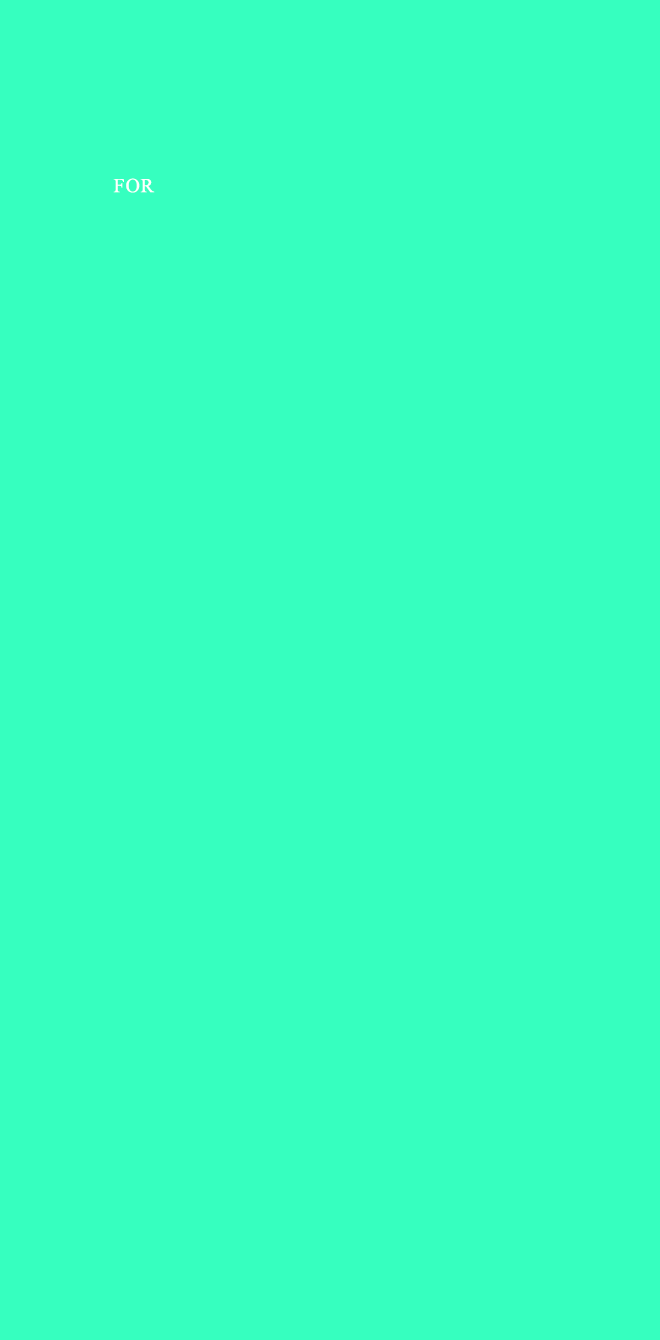
<style>
.page{position:relative;width:660px;height:1340px;background:#36ffbf}
.page>*{position:absolute;margin:0}
.t1{font:19.8px "TimesNewRomanPSMT";color:#ffffff;text-transform:uppercase}
</style>
<div class="page">
<p class="t1" style="left:113px;top:178px;width:42px;height:15px">for</p>
</div>
